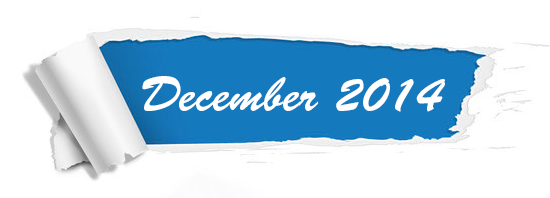
<style>
.page{position:relative;width:550px;height:198px;background:#ffffff}
.page>*{position:absolute;margin:0}
.t1{font:48px "BrushScriptStd";color:#ffffff}
</style>
<div class="page">
<p class="t1" style="left:142px;top:76px;width:303px;height:36px">December 2014</p>
</div>
